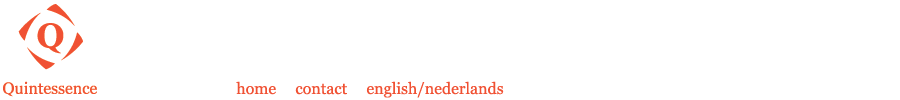
<style>
.page{position:relative;width:900px;height:100px;background:#ffffff}
.page>*{position:absolute;margin:0}
.t1{font:16px "Georgia";color:#f05133}
</style>
<div class="page">
<p class="t1" style="left:236px;top:81px;width:268px;height:17px">home     contact     english/nederlands</p>
</div>
